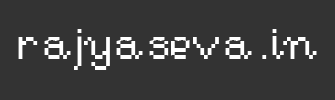
<style>
.page{position:relative;width:335px;height:100px;background:#333333}
.page>*{position:absolute;margin:0}
.t1{font:59.3px "RSEHandwritingPi";letter-spacing:-0.01em;color:#ffffff}
</style>
<div class="page">
<p class="t1" style="left:18px;top:29px;width:299px;height:41px">rajyaseva.in</p>
</div>
